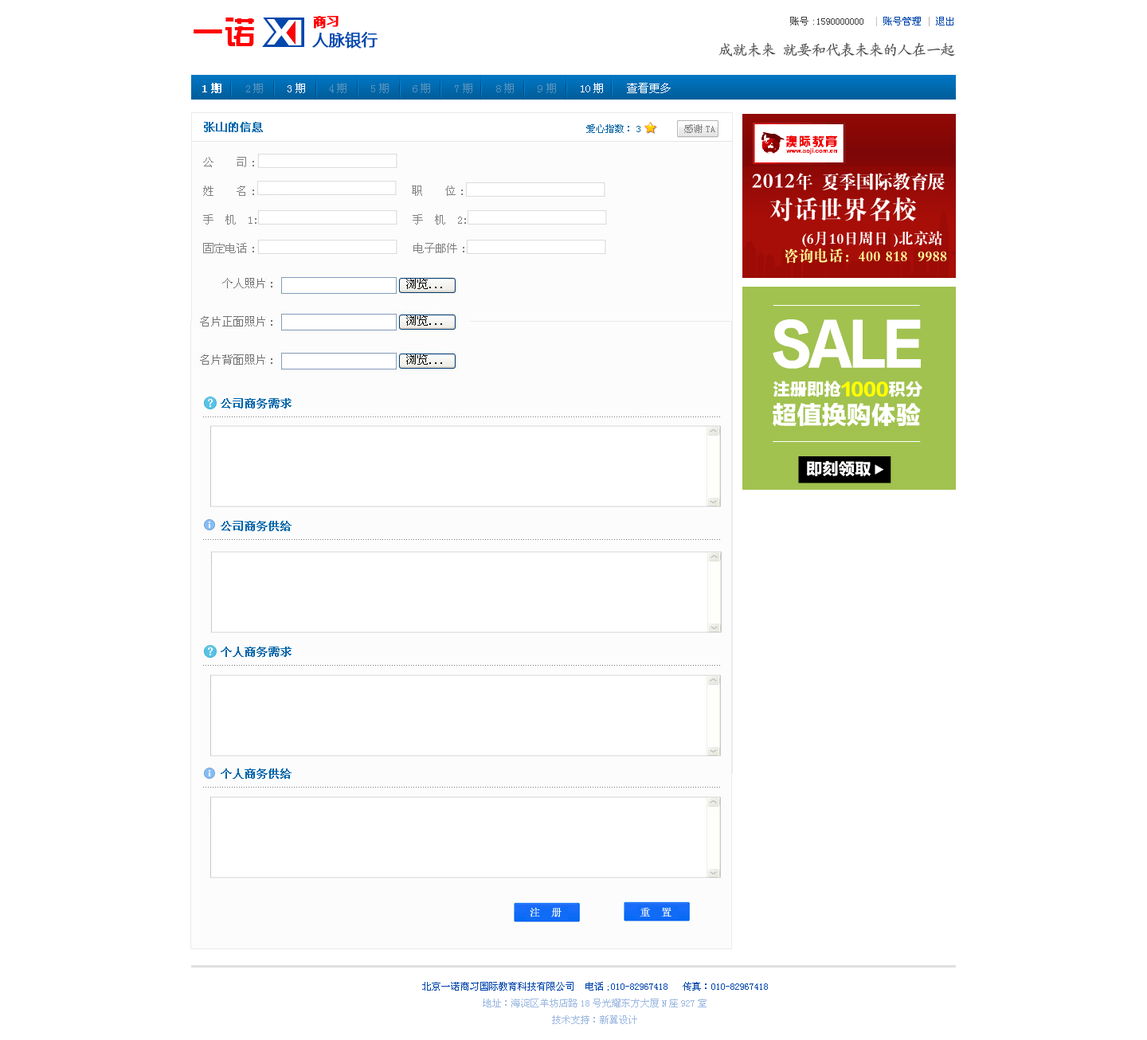
<style>
.page{position:relative;width:1147px;height:1040px;background:#ffffff}
.page>*{position:absolute;margin:0}
.t1{font:12.7px "MicrosoftYaHei";color:#ff0101;font-weight:bold}
.t2{font:31.9px "HYk1gj";color:#ff0101}
.t3{font:31.9px "HYk1gj";letter-spacing:-0.12em;color:#ff0101}
.t4{font:9.6px "SimSun";color:#404040}
.t5{font:9.6px "SimSun";color:#c3c3c3}
.t6{font:9.6px "SimSun";color:#0247ad}
.t7{font:9.6px "SimSun";color:#b5b5b5}
.t8{font:15.9px "MicrosoftYaHei";color:#0247ad;font-weight:bold}
.t9{font:14.3px "KaiTi_GB2312";color:#464646}
.t10{font:11.1px "SimSun";color:#5492bb}
.t11{font:11.1px "SimSun";color:#ffffff;font-weight:bold}
.t12{font:11.1px "SimSun";color:#ffffff}
.t13{font:11.1px "SimSun";color:#0169ad;font-weight:bold}
.t14{font:9.6px "SimSun";color:#0163a4}
.t15{font:9.6px "SimSun";color:#878787}
.t16{font:11.1px/28.7px "SimSun"}
.t17{font:11.1px "SimSun";color:#0167aa;font-weight:bold}
.t18{font:4.8px "SimSun";color:#7c7c7c;font-weight:bold}
.t19{font:10.4px "SimSun";color:#fafbfd;font-weight:bold}
.t20{font:9.6px "SimSun";color:#9db9e2}
</style>
<div class="page">
<p class="t1" style="left:193px;top:16px;width:145px;height:30px"><span class="t2">一</span><span class="t3">诺     </span>商习</p>
<p class="t4" style="left:790px;top:17px;width:163px;height:9px">账号:1590000000  <span class="t5">| </span><span class="t6">账号管理 </span><span class="t7">| </span><span class="t6">退出</span></p>
<p class="t8" style="left:312px;top:32px;width:65px;height:17px">人脉银行</p>
<p class="t9" style="left:718px;top:42px;width:237px;height:15px">成就未来 就要和代表未来的人在一起</p>
<p class="t10" style="left:202px;top:83px;width:468px;height:10px"><span class="t11">1期    </span>2期 <span class="t12">   3期    </span>4期    5期    6期    7期    8期    9期<span class="t12">    10期    查看更多</span></p>
<p class="t13" style="left:204px;top:122px;width:59px;height:10px">张山的信息</p>
<p class="t14" style="left:586px;top:124px;width:129px;height:9px">爱心指数： 3         <span class="t15">感谢TA</span></p>
<p class="t16" style="left:203px;top:157px;width:378px;height:96px">公    司:北京对外贸易总公司<br>姓    名: 张山                       职    位: XX部门经理/总监<br>手  机  1: 1590000000                  手  机  2:15900000 <br>固定电话: 010-8598888             电子邮件:010-8899888</p>
<p class="t17" style="left:221px;top:398px;width:70px;height:10px">公司商务需求</p>
<p class="t18" style="left:203px;top:416px;width:517px;height:1px">.........................................................................................................................................................................................................................</p>
<p class="t17" style="left:221px;top:521px;width:70px;height:10px">公司商务供给</p>
<p class="t18" style="left:203px;top:539px;width:517px;height:1px">.........................................................................................................................................................................................................................</p>
<p class="t17" style="left:221px;top:647px;width:70px;height:10px">个人商务需求</p>
<p class="t18" style="left:203px;top:665px;width:517px;height:1px">.........................................................................................................................................................................................................................</p>
<p class="t17" style="left:221px;top:768px;width:70px;height:11px">个人商务供给</p>
<p class="t18" style="left:203px;top:787px;width:517px;height:1px">.........................................................................................................................................................................................................................</p>
<p class="t19" style="left:530px;top:907px;width:31px;height:10px">注  册</p>
<p class="t19" style="left:639px;top:907px;width:32px;height:10px">重  置</p>
<p class="t6" style="left:422px;top:982px;width:346px;height:42px;text-align:center">北京一诺商习国际教育科技有限公司  电话;010-82967418   传真：010-82967418<br><span class="t20">地址：海淀区羊坊店路18号光耀东方大厦N座927室<br>技术支持：新翼设计</span></p>
</div>
